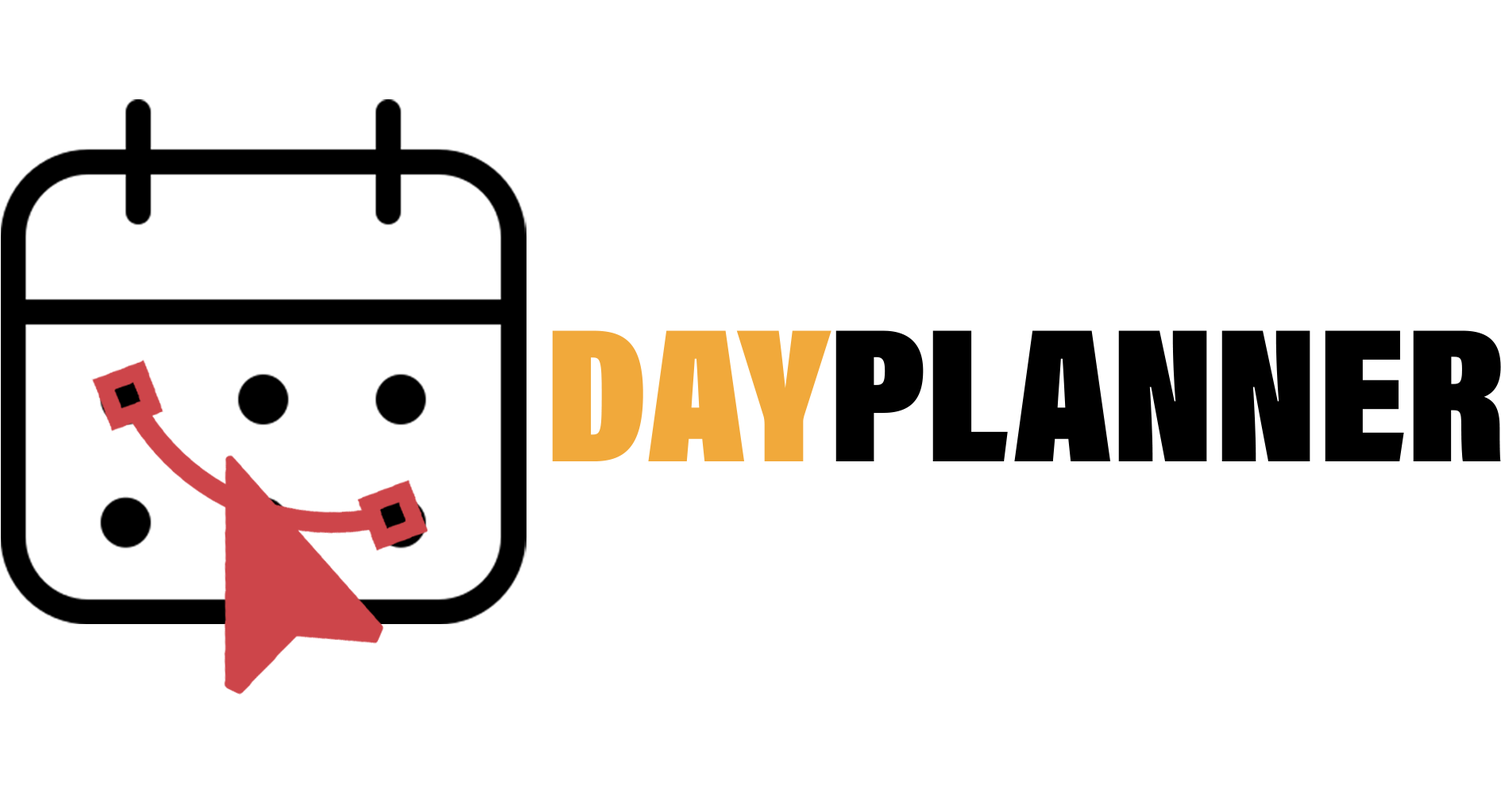
<style>
.page{position:relative;width:1501px;height:794px;background:#ffffff}
.page>*{position:absolute;margin:0}
.t1{font:193.8px "AcuminConcept-CondensedUltraBlack";color:#000000}
.t2{font:193.8px "AcuminConcept-CondensedUltraBlack";color:#f1a93b}
</style>
<div class="page">
<p class="t1" style="left:552px;top:330px;width:949px;height:131px"><span class="t2">DAY</span>PLANNER</p>
</div>
